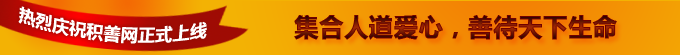
<style>
.page{position:relative;width:680px;height:55px}
.page>*{position:absolute;margin:0}
.t1{font:17px "MicrosoftYaHei-Bold";letter-spacing:0.01em;color:#ffffff}
.t2{font:24px "MicrosoftYaHei-Bold";letter-spacing:0.01em;font-weight:bold}
</style>
<div class="page">
<p class="t1" style="left:18px;top:6px;width:189px;height:38px;rotate:5deg">热烈庆祝积善网正式上线</p>
<p class="t2" style="left:294px;top:15px;width:323px;height:25px">集合人道爱心，善待天下生命</p>
</div>
